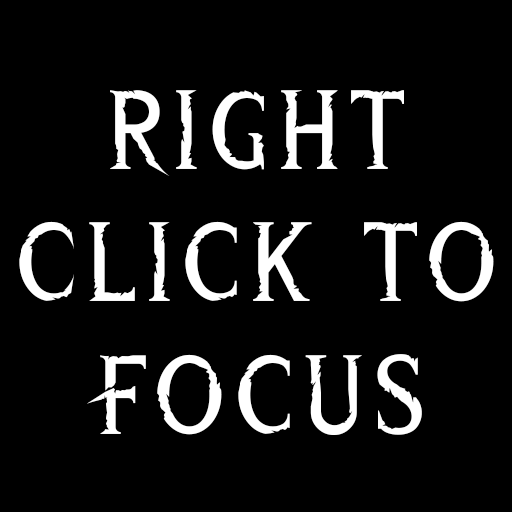
<style>
.page{position:relative;width:512px;height:512px;background:#000000}
.page>*{position:absolute;margin:0}
.t1{font:110.8px "WreckedShipRegular";letter-spacing:0.05em;color:#ffffff}
</style>
<div class="page">
<p class="t1" style="left:19px;top:90px;width:475px;height:345px;text-align:center">Right Click to <br>Focus</p>
</div>
